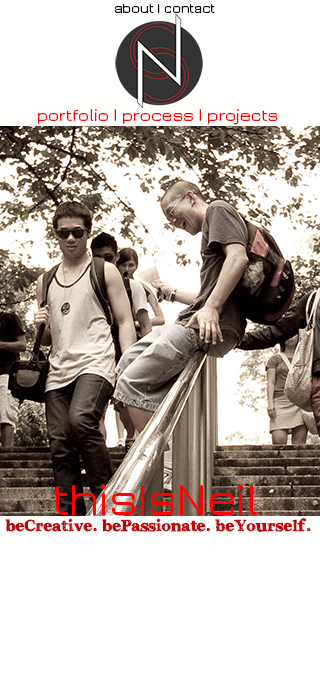
<style>
.page{position:relative;width:320px;height:700px;background:#fffffd}
.page>*{position:absolute;margin:0}
.t1{font:14px "JuraMedium";color:#060606}
.t2{font:18px "JuraMedium";color:#fc0202}
.t3{font:48px "JuraMedium";color:#fc0202}
.t4{font:16px "Archistico-Normal";color:#bb0707}
</style>
<div class="page">
<p class="t1" style="left:115px;top:4px;width:100px;height:10px">about | contact</p>
<p class="t2" style="left:38px;top:109px;width:240px;height:16px">portfolio | process | projects</p>
<p class="t3" style="left:54px;top:484px;width:204px;height:32px">thisIsNeil</p>
<p class="t4" style="left:5px;top:518px;width:306px;height:14px">beCreative. bePassionate. beYourself.</p>
</div>
